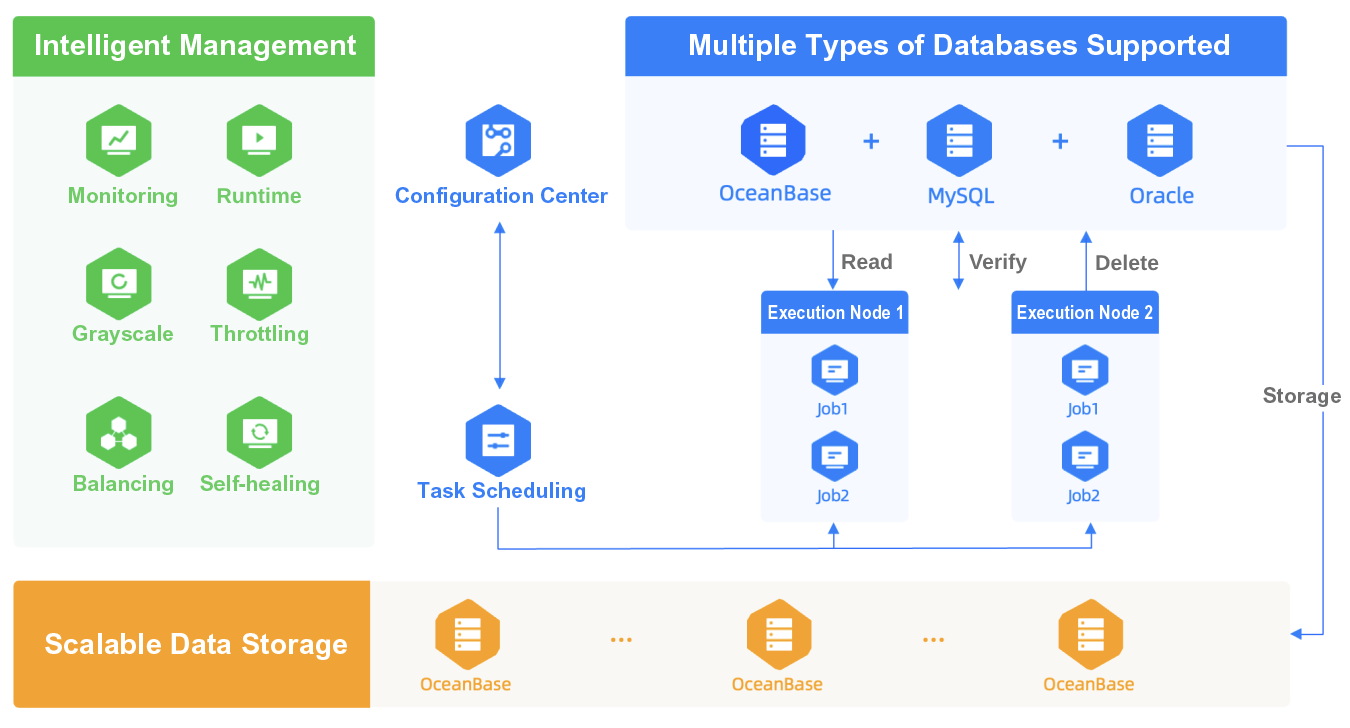
<style>
.page{position:relative;width:1350px;height:728px;background:#ffffff}
.page>*{position:absolute;margin:0}
.t1{font:29px "Arial-BoldMT";color:#ffffff}
.t2{font:21.3px "Arial-BoldMT";color:#70cb68}
.t3{font:21.3px "Arial-BoldMT";color:#3a7ff5}
.t4{font:21.3px "Arial-BoldMT";color:#6e6e6e}
.t5{font:18.6px "Arial-BoldMT";color:#ffffff;scale:0.88 1}
</style>
<div class="page">
<p class="t1" style="left:36px;top:34px;width:320px;height:27px">Intelligent Management</p>
<p class="t1" style="left:690px;top:34px;width:539px;height:27px">Multiple Types of Databases Supported</p>
<p class="t2" style="left:69px;top:187px;width:108px;height:20px">Monitoring</p>
<p class="t2" style="left:217px;top:187px;width:84px;height:17px">Runtime</p>
<p class="t3" style="left:395px;top:187px;width:214px;height:20px">Configuration Center</p>
<p class="t4" style="left:842px;top:253px;width:50px;height:17px">Read</p>
<p class="t4" style="left:969px;top:253px;width:58px;height:21px">Verify</p>
<p class="t4" style="left:1096px;top:254px;width:63px;height:17px">Delete</p>
<p class="t5" style="left:768px;top:305px;width:134px;height:14px">Execution Node 1</p>
<p class="t5" style="left:1017px;top:305px;width:136px;height:14px">Execution Node 2</p>
<p class="t2" style="left:72px;top:325px;width:101px;height:20px">Grayscale</p>
<p class="t2" style="left:210px;top:325px;width:98px;height:20px">Throttling</p>
<p class="t4" style="left:1263px;top:387px;width:78px;height:20px">Storage</p>
<p class="t2" style="left:74px;top:475px;width:99px;height:20px">Balancing</p>
<p class="t2" style="left:200px;top:475px;width:119px;height:20px">Self-healing</p>
<p class="t3" style="left:417px;top:482px;width:168px;height:20px">Task Scheduling</p>
<p class="t1" style="left:45px;top:633px;width:302px;height:27px">Scalable Data Storage</p>
</div>
